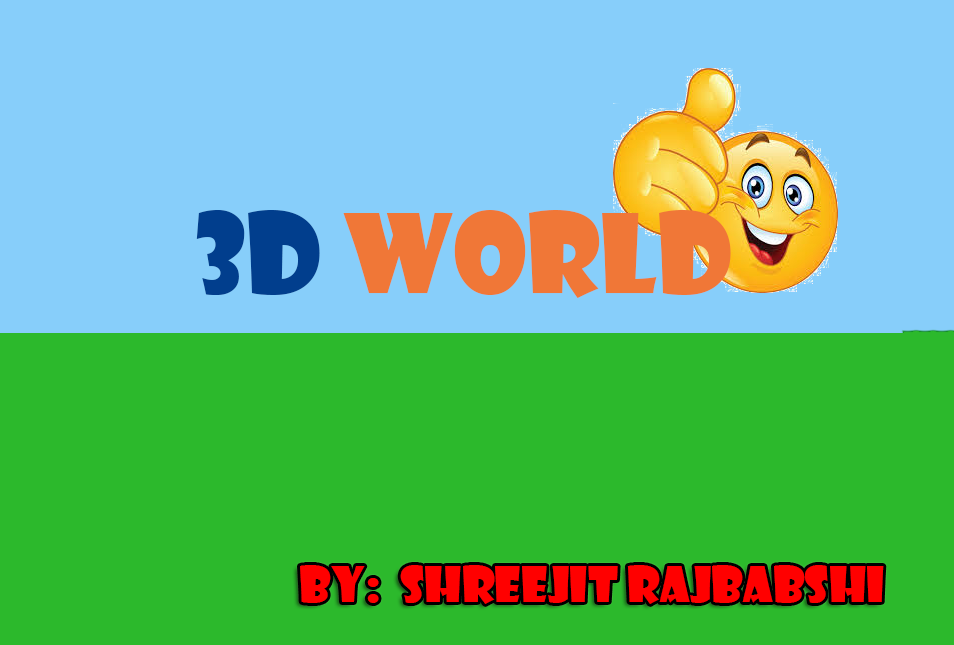
<style>
.page{position:relative;width:954px;height:645px;background:#2cb92c}
.page>*{position:absolute;margin:0}
.t1{font:107px "ShowcardGothic-Reg";color:#f07737}
.t2{font:107px "ShowcardGothic-Reg";color:#013e8d}
.t3{font:48px "ShowcardGothic-Reg";color:#ff0000}
</style>
<div class="page">
<p class="t1" style="left:196px;top:210px;width:535px;height:88px"><span class="t2">3D</span> WORLD</p>
<p class="t3" style="left:300px;top:565px;width:584px;height:39px">By:  Shreejit Rajbabshi</p>
</div>
